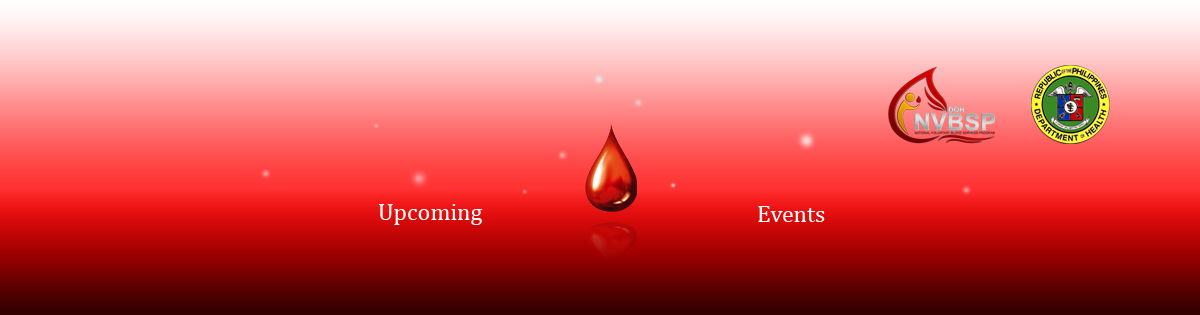
<style>
.page{position:relative;width:1200px;height:315px}
.page>*{position:absolute;margin:0}
.t1{font:24px "Cambria";color:#ffffff}
</style>
<div class="page">
<p class="t1" style="left:378px;top:204px;width:105px;height:21px">Upcoming</p>
<p class="t1" style="left:758px;top:206px;width:67px;height:16px">Events</p>
</div>
